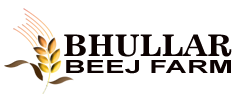
<style>
.page{position:relative;width:242px;height:94px;background:#ffffff}
.page>*{position:absolute;margin:0}
.t1{font:30px "News701BT-BoldA";color:#0c0201}
.t2{font:18px "Arial-BoldMT";color:#0c0201;scale:1.64 1}
</style>
<div class="page">
<p class="t1" style="left:64px;top:34px;width:168px;height:23px">BHULLAR</p>
<p class="t2" style="left:66px;top:60px;width:165px;height:14px">BEEJ FARM</p>
</div>
